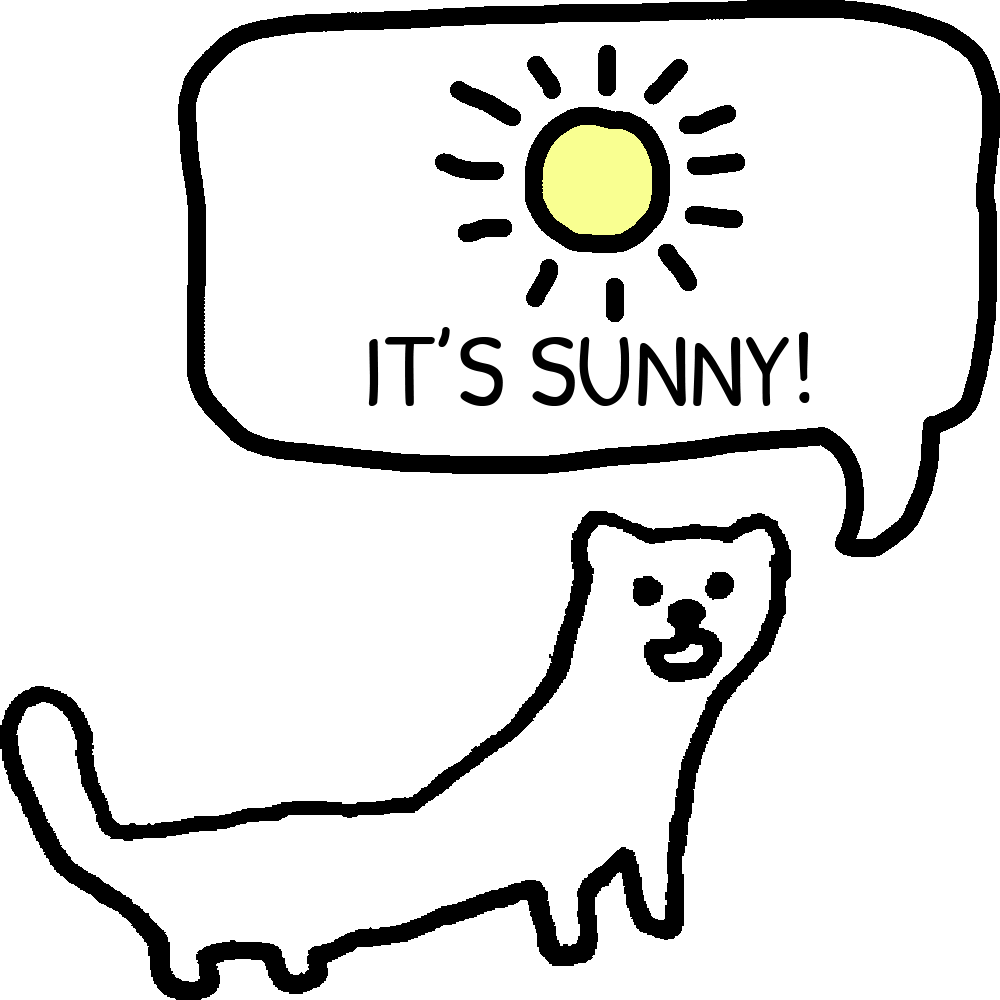
<style>
.page{position:relative;width:1000px;height:1000px;background:#ffffff}
.page>*{position:absolute;margin:0}
.t1{font:104.2px "PatrickHandSC-Regular";color:#000000}
</style>
<div class="page">
<p class="t1" style="left:368px;top:327px;width:442px;height:79px">IT’S SUNNY!</p>
</div>
